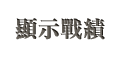
<style>
.page{position:relative;width:120px;height:57px;background:#ffffff}
.page>*{position:absolute;margin:0}
.t1{font:22px "RyuminPr6N-ExBold";color:#66615a;font-weight:bold}
</style>
<div class="page">
<p class="t1" style="left:15px;top:18px;width:90px;height:22px">顯示戰績</p>
</div>
